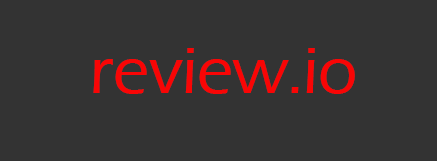
<style>
.page{position:relative;width:437px;height:161px;background:#333333}
.page>*{position:absolute;margin:0}
.t1{font:66.7px "ErasITC-Medium";color:#f90505}
</style>
<div class="page">
<p class="t1" style="left:93px;top:48px;width:262px;height:46px">review.io</p>
</div>
